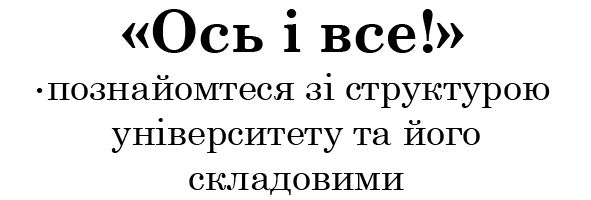
<style>
.page{position:relative;width:591px;height:200px;background:#ffffff}
.page>*{position:absolute;margin:0}
.t1{font:58.3px "CenturySchoolbook-Bold";color:#000000}
.t2{font:37.5px "CenturySchoolbook";color:#000000}
.t3{font:25px "CenturySchoolbook";color:#000000}
</style>
<div class="page">
<p class="t1" style="left:121px;top:9px;width:343px;height:44px">«Ось і все!»</p>
<p class="t2" style="left:36px;top:73px;width:514px;height:122px;text-align:center"><span class="t3">•</span>познайомтеся зі структурою <br>університету та його<br>складовими</p>
</div>
